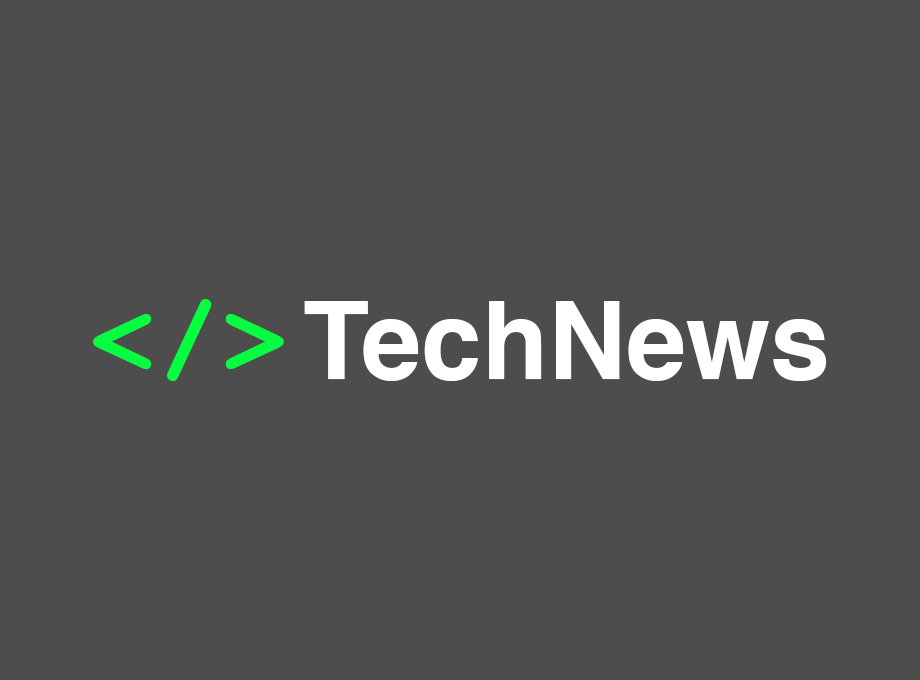
<style>
.page{position:relative;width:920px;height:680px;background:#4d4d4d}
.page>*{position:absolute;margin:0}
.t1{font:108.2px "Courier-Bold";color:#05fe40}
.t2{font:108.2px "Helvetica-Bold";color:#ffffff}
</style>
<div class="page">
<p class="t1" style="left:93px;top:299px;width:191px;height:82px">&lt;/&gt;</p>
<p class="t2" style="left:304px;top:301px;width:523px;height:80px">TechNews</p>
</div>
